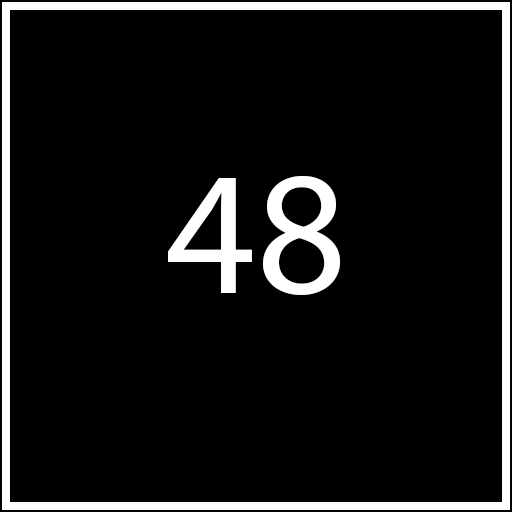
<style>
.page{position:relative;width:512px;height:512px;background:#000000}
.page>*{position:absolute;margin:0}
.t1{font:177px "MyriadPro-Regular";color:#ffffff}
</style>
<div class="page">
<p class="t1" style="left:168px;top:175px;width:172px;height:120px">48</p>
</div>
